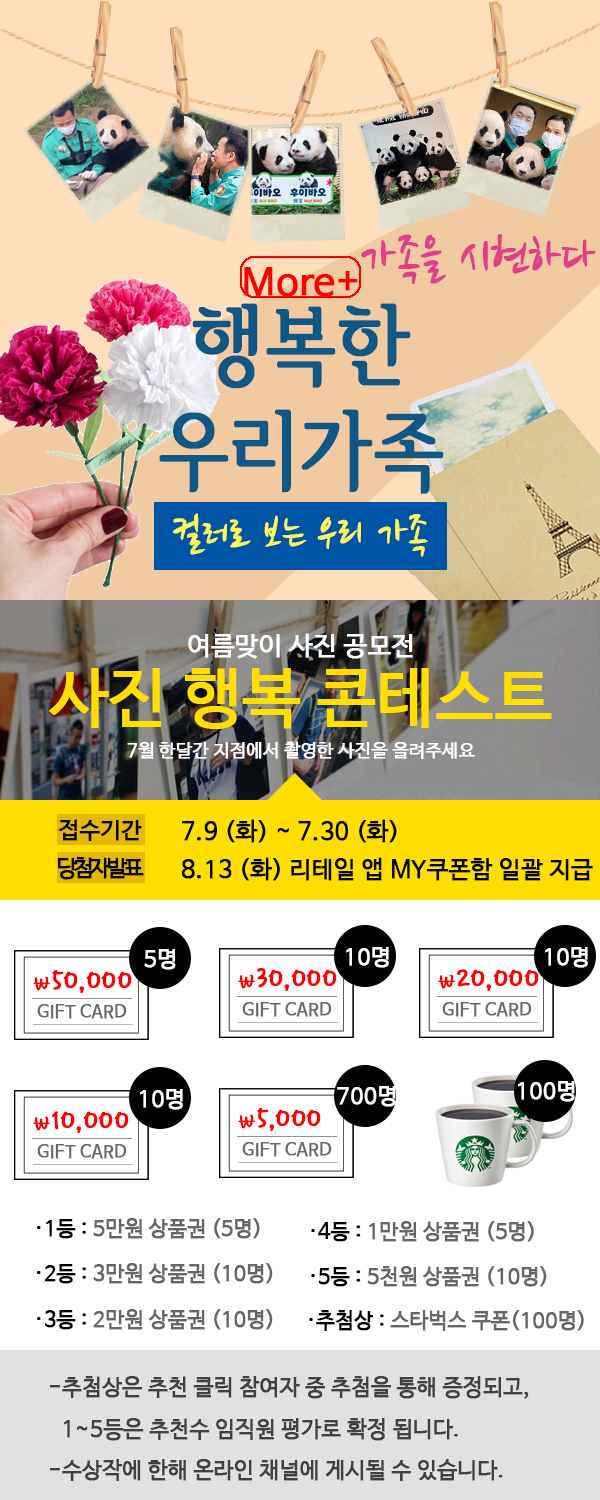
<style>
.page{position:relative;width:600px;height:1500px;background:#ffffff}
.page>*{position:absolute;margin:0}
.t1{font:50.6px "NanumBrush";color:#e03e89;font-weight:bold}
.t2{font:38px "NanumBarunGothic";color:#ff0000;font-weight:bold}
.t3{font:88px "SeoulHangangCM";color:#0f5885;font-weight:bold}
.t4{font:43.8px "NanumBrush";color:#fbf85d;font-weight:bold}
.t5{font:18px/38px "NanumBarunGothic";color:#ffffff;font-weight:bold}
.t6{font:26px "NanumBarunGothic";color:#ffffff;font-weight:bold}
.t7{font:64px/64px "NanumBarunGothic";color:#ffde00;font-weight:bold}
.t8{font:22.4px "NanumBarunGothic";color:#000000;font-weight:bold}
.t9{font:24px "NanumBarunGothic";color:#000000;font-weight:bold}
.t10{font:22.4px "NanumBarunGothic";letter-spacing:-0.2em;color:#000000;font-weight:bold}
.t11{font:22.5px "NanumBarunGothic";color:#ffffff;font-weight:bold}
.t12{font:33px "HoonWcatR";color:#ff0000;font-weight:bold}
.t13{font:22.5px "HoonWcatR";color:#ff0000;font-weight:bold}
.t14{font:17px "NanumBarunGothic";color:#696969;font-weight:bold}
.t15{font:20.8px "NanumBarunGothic";color:#666666;font-weight:bold}
.t16{font:20.8px "NanumBarunGothic";color:#000000;font-weight:bold}
.t17{font:21.9px/41.2px "NanumBarunGothic";color:#414141;font-weight:bold}
</style>
<div class="page">
<p class="t1" style="left:361px;top:234px;width:235px;height:50px">가족을 시현하다</p>
<p class="t2" style="left:244px;top:267px;width:114px;height:30px">More+</p>
<p class="t3" style="left:159px;top:303px;width:285px;height:191px;text-align:center">행복한<br>우리가족</p>
<p class="t4" style="left:172px;top:513px;width:256px;height:44px">컬러로 보는 우리 가족</p>
<p class="t5" style="left:49px;top:633px;width:503px;height:126px;text-align:center"><span class="t6">여름맞이 사진 공모전<br></span><span class="t7">사진 행복 콘테스트<br></span>7월 한달간 지점에서 촬영한 사진을 올려주세요</p>
<p class="t8" style="left:58px;top:819px;width:84px;height:22px">접수기간</p>
<p class="t9" style="left:182px;top:819px;width:215px;height:24px">7.9 (화) ~ 7.30 (화)</p>
<p class="t10" style="left:58px;top:857px;width:86px;height:23px">당첨자 발표</p>
<p class="t9" style="left:181px;top:857px;width:412px;height:24px">8.13 (화) 리테일 앱 MY쿠폰함 일괄 지급</p>
<p class="t11" style="left:144px;top:949px;width:32px;height:21px">5명</p>
<p class="t11" style="left:346px;top:947px;width:43px;height:21px">10명</p>
<p class="t11" style="left:545px;top:947px;width:43px;height:21px">10명</p>
<p class="t12" style="left:33px;top:970px;width:99px;height:23px"><span class="t13">\</span>50,000</p>
<p class="t12" style="left:238px;top:968px;width:99px;height:23px"><span class="t13">\</span>30,000</p>
<p class="t12" style="left:438px;top:969px;width:101px;height:22px"><span class="t13">\</span>20,000</p>
<p class="t14" style="left:37px;top:1004px;width:90px;height:15px">GIFT CARD</p>
<p class="t14" style="left:242px;top:1002px;width:90px;height:15px">GIFT CARD</p>
<p class="t14" style="left:442px;top:1002px;width:90px;height:15px">GIFT CARD</p>
<p class="t11" style="left:337px;top:1086px;width:59px;height:21px">700명</p>
<p class="t11" style="left:518px;top:1081px;width:57px;height:21px">100명</p>
<p class="t11" style="left:140px;top:1089px;width:43px;height:21px">10명</p>
<p class="t12" style="left:238px;top:1108px;width:83px;height:23px"><span class="t13">\</span>5,000</p>
<p class="t12" style="left:33px;top:1111px;width:96px;height:22px"><span class="t13">\</span>10,000</p>
<p class="t14" style="left:37px;top:1144px;width:90px;height:15px">GIFT CARD</p>
<p class="t14" style="left:242px;top:1142px;width:90px;height:15px">GIFT CARD</p>
<p class="t15" style="left:37px;top:1218px;width:223px;height:21px"><span class="t16">·1등 : </span>5만원 상품권 (5명)</p>
<p class="t15" style="left:311px;top:1221px;width:223px;height:21px"><span class="t16">·4등 : </span>1만원 상품권 (5명)</p>
<p class="t15" style="left:37px;top:1263px;width:236px;height:21px"><span class="t16">·2등 : </span>3만원 상품권 (10명)</p>
<p class="t15" style="left:311px;top:1266px;width:236px;height:21px"><span class="t16">·5등 : </span>5천원 상품권 (10명)</p>
<p class="t15" style="left:37px;top:1309px;width:236px;height:21px"><span class="t16">·3등 : </span>2만원 상품권 (10명)</p>
<p class="t15" style="left:309px;top:1310px;width:275px;height:21px"><span class="t16">·추첨상 : </span>스타벅스 쿠폰(100명)</p>
<p class="t17" style="left:50px;top:1376px;width:479px;height:105px">-추첨상은 추천 클릭 참여자 중 추첨을 통해 증정되고,<br> 1~5등은 추천수 임직원 평가로 확정 됩니다.<br>-수상작에 한해 온라인 채널에 게시될 수 있습니다.</p>
</div>
